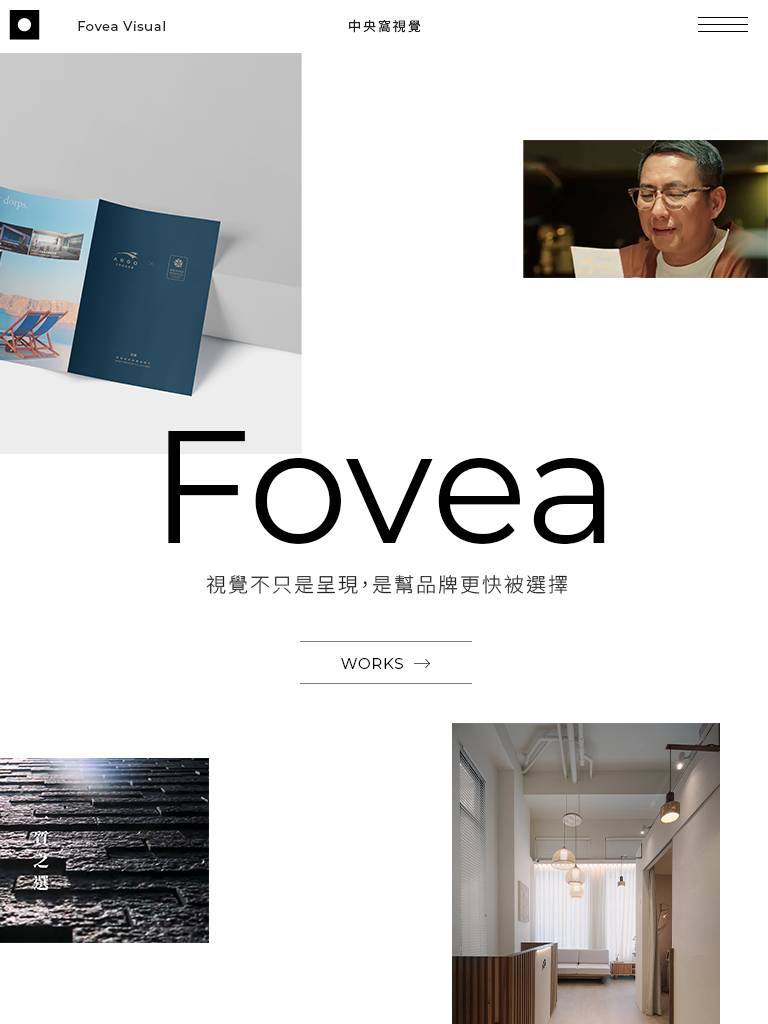
<style>
.page{position:relative;width:768px;height:1024px;background:#ffffff}
.page>*{position:absolute;margin:0}
.t1{font:13px "Montserrat-Medium";letter-spacing:0.05em;color:#202020}
.t2{font:13px "NotoSansTC-Regular";letter-spacing:0.15em;color:#202020}
.t3{font:160px "Montserrat-Regular";color:#000000}
.t4{font:20px "NotoSansTC-Light";letter-spacing:0.1em;color:#202020}
.t5{font:15px "Montserrat-Regular";letter-spacing:0.05em;color:#000000;text-transform:uppercase}
</style>
<div class="page">
<p class="t1" style="left:78px;top:21px;width:87px;height:10px">Fovea Visual</p>
<p class="t2" style="left:349px;top:19px;width:72px;height:14px">中央窩視覺</p>
<p class="t3" style="left:168px;top:431px;width:437px;height:113px">Fovea</p>
<p class="t4" style="left:206px;top:575px;width:362px;height:19px">視覺不只是呈現，是幫品牌更快被選擇</p>
<p class="t5" style="left:341px;top:658px;width:62px;height:11px">works</p>
</div>
